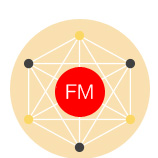
<style>
.page{position:relative;width:158px;height:158px;background:#ffffff}
.page>*{position:absolute;margin:0}
.t1{font:18px "FZLTXHK--GBK1-0";color:#ffffff}
</style>
<div class="page">
<p class="t1" style="left:66px;top:84px;width:27px;height:15px">FM</p>
</div>
